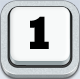
<style>
.page{position:relative;width:80px;height:79px;background:#f7f9f9}
.page>*{position:absolute;margin:0}
.t1{font:46.4px "Rockwell-ExtraBold";color:#000000}
</style>
<div class="page">
<p class="t1" style="left:30px;top:16px;width:19px;height:33px">1</p>
</div>
